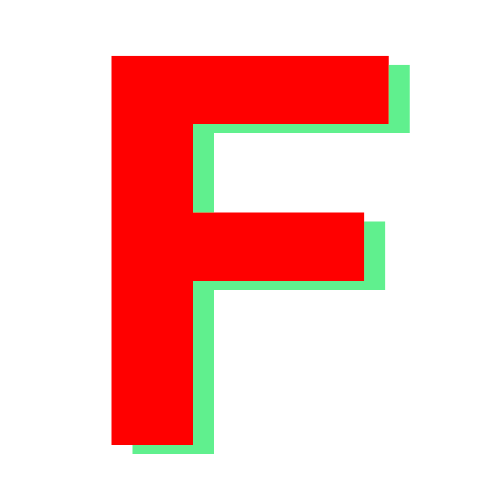
<style>
.page{position:relative;width:500px;height:500px;background:#ffffff}
.page>*{position:absolute;margin:0}
.t1{font:586px "CoolveticaRg-Regular";color:#ff0000}
</style>
<div class="page">
<p class="t1" style="left:111px;top:55px;width:278px;height:390px">F</p>
<p class="t1" style="left:132px;top:64px;width:278px;height:390px">F</p>
</div>
